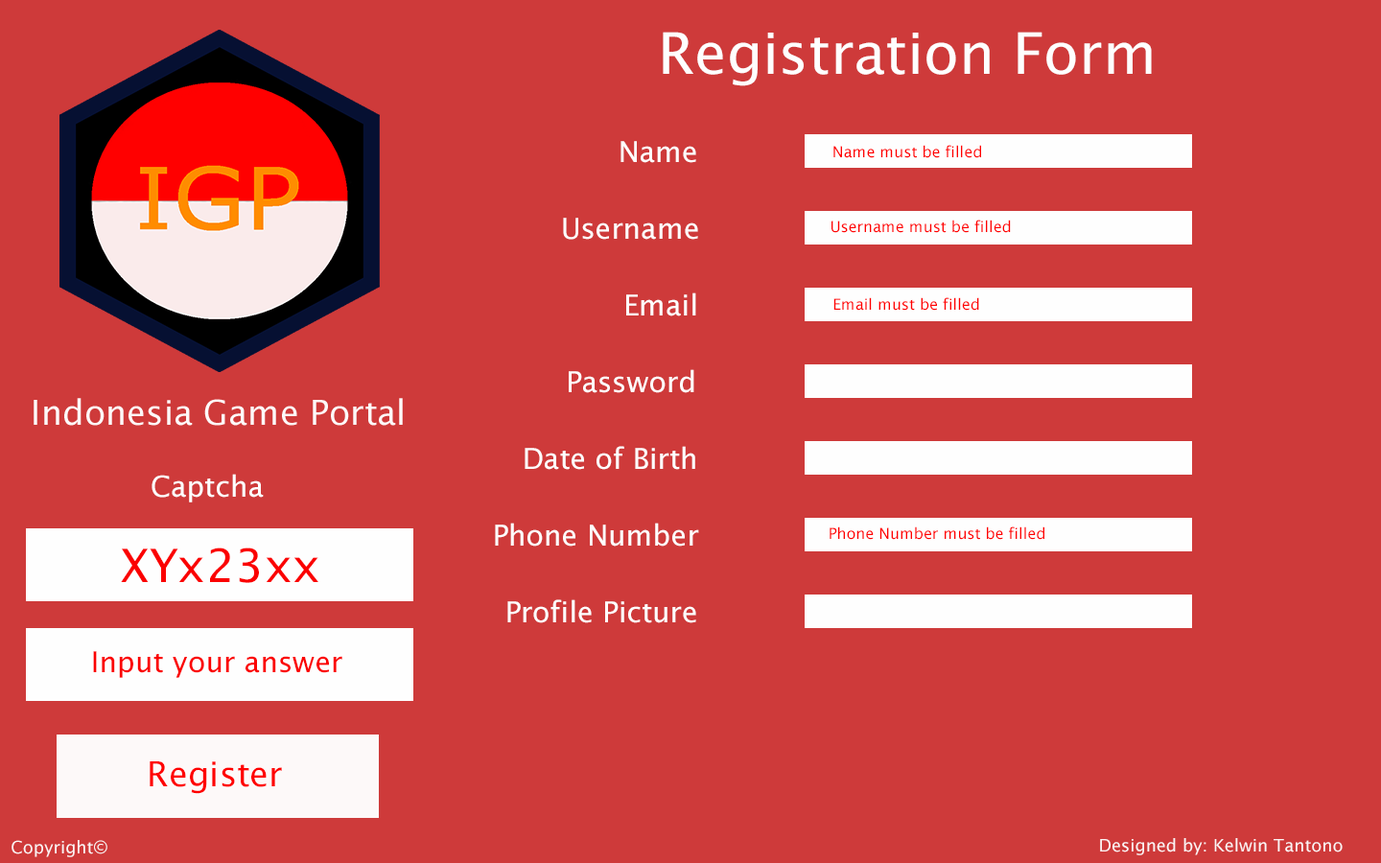
<style>
.page{position:relative;width:1381px;height:863px;background:#ce3a3a}
.page>*{position:absolute;margin:0}
.t1{font:57.6px "LucidaSans";color:#fefefe}
.t2{font:28.8px "LucidaSans";color:#fefefe}
.t3{font:15.3px "LucidaSans";color:#ff0000}
.t4{font:46px "LucidaSans";color:#fb0000}
.t5{font:28.8px "LucidaSans";color:#fb0000}
.t6{font:34.5px "LucidaSans";color:#ff0000}
.t7{font:17.3px "LucidaSans";color:#fcf4f4}
</style>
<div class="page">
<p class="t1" style="left:663px;top:32px;width:489px;height:54px">Registration Form</p>
<p class="t2" style="left:621px;top:141px;width:75px;height:22px">Name</p>
<p class="t3" style="left:834px;top:145px;width:147px;height:13px">Name must be filled</p>
<p class="t2" style="left:563px;top:218px;width:135px;height:22px">Username</p>
<p class="t3" style="left:832px;top:220px;width:179px;height:13px">Username must be filled</p>
<p class="t2" style="left:626px;top:293px;width:70px;height:24px">Email</p>
<p class="t3" style="left:834px;top:297px;width:145px;height:14px">Email must be filled</p>
<p class="t2" style="left:569px;top:369px;width:125px;height:24px">Password</p>
<p class="t2" style="left:525px;top:446px;width:170px;height:24px">Date of Birth</p>
<p class="t2" style="left:152px;top:474px;width:112px;height:29px">Captcha</p>
<p class="t2" style="left:495px;top:523px;width:204px;height:24px">Phone Number</p>
<p class="t3" style="left:830px;top:527px;width:215px;height:13px">Phone Number must be filled</p>
<p class="t4" style="left:121px;top:548px;width:197px;height:35px">XYx23xx</p>
<p class="t2" style="left:507px;top:600px;width:189px;height:23px">Profile Picture</p>
<p class="t5" style="left:93px;top:651px;width:249px;height:27px">Input your answer</p>
<p class="t6" style="left:150px;top:762px;width:132px;height:32px">Register</p>
<p class="t7" style="left:12px;top:840px;width:95px;height:18px">Copyright©</p>
<p class="t7" style="left:1100px;top:838px;width:243px;height:18px">Designed by: Kelwin Tantono</p>
</div>
